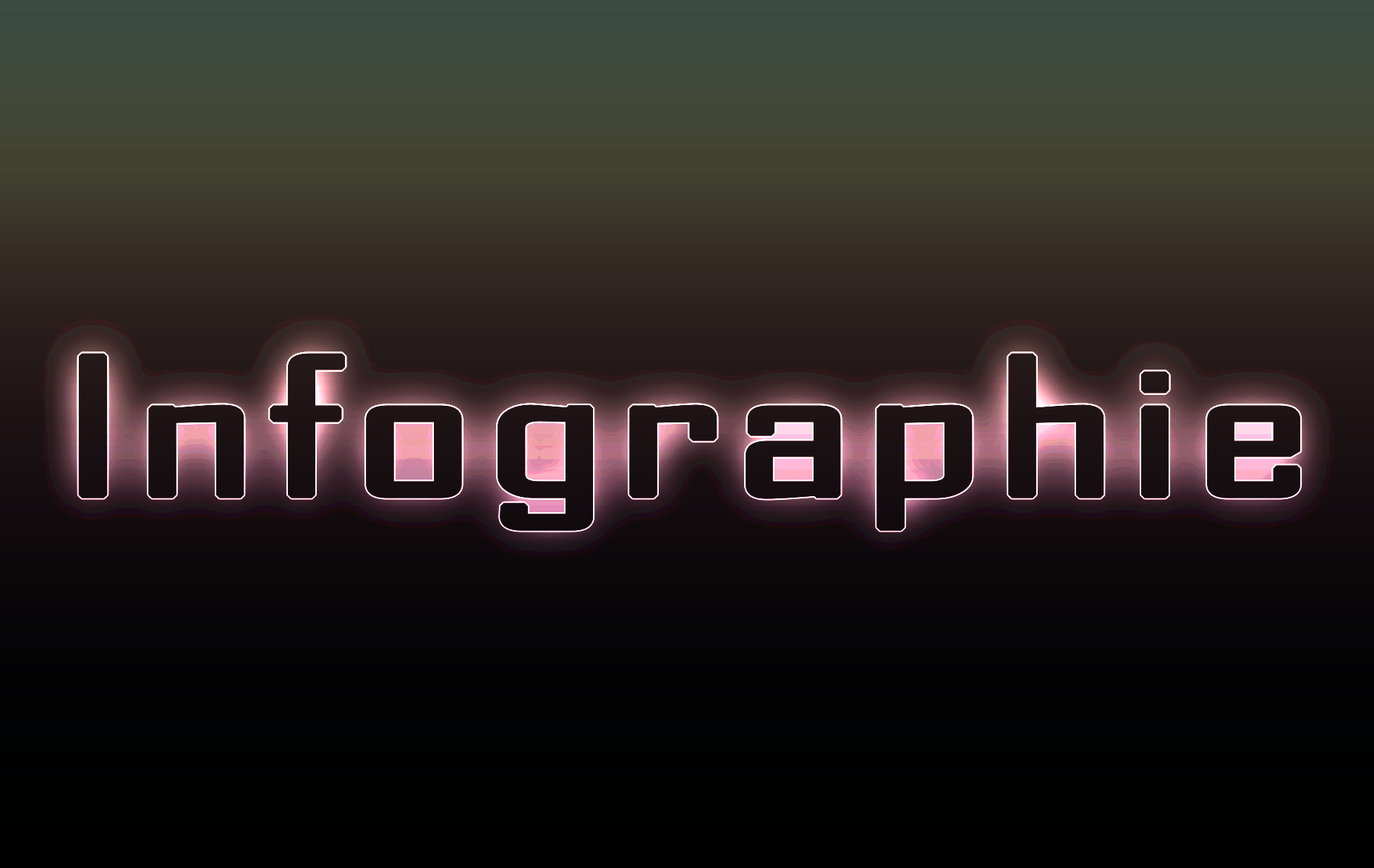
<style>
.page{position:relative;width:1374px;height:868px}
.page>*{position:absolute;margin:0}
.t1{font:180.8px "AgencyFB-Reg";color:#1a1013;font-weight:bold;scale:1.8 1}
</style>
<div class="page">
<p class="t1" style="left:78px;top:353px;width:1223px;height:178px">Infographie</p>
<p class="t1" style="left:78px;top:353px;width:1223px;height:178px">Infographie</p>
<p class="t1" style="left:78px;top:353px;width:1223px;height:178px">Infographie</p>
<p class="t1" style="left:78px;top:353px;width:1223px;height:178px">Infographie</p>
<p class="t1" style="left:78px;top:353px;width:1223px;height:178px">Infographie</p>
<p class="t1" style="left:78px;top:353px;width:1223px;height:178px">Infographie</p>
<p class="t1" style="left:78px;top:353px;width:1223px;height:178px">Infographie</p>
<p class="t1" style="left:78px;top:353px;width:1223px;height:178px">Infographie</p>
<p class="t1" style="left:78px;top:353px;width:1223px;height:178px">Infographie</p>
<p class="t1" style="left:78px;top:353px;width:1223px;height:178px">Infographie</p>
<p class="t1" style="left:78px;top:353px;width:1223px;height:178px">Infographie</p>
</div>
